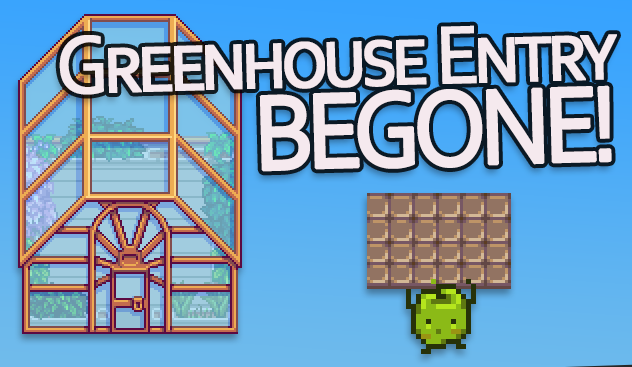
<style>
.page{position:relative;width:632px;height:367px}
.page>*{position:absolute;margin:0}
.t1{font:86px/82px "Corbel";letter-spacing:-0.075em;color:#f5e9ee;font-variant:small-caps;font-weight:bold;scale:0.9 1}
.t2{font:112px/82px "Corbel";letter-spacing:-0.075em;color:#f5e9ee;font-variant:small-caps;font-weight:bold;scale:0.9 1}
</style>
<div class="page">
<p class="t1" style="left:59px;top:25px;width:558px;height:147px;text-align:right;rotate:-2deg">Greenhouse Entry<br><span class="t2">BEGONE!</span></p>
</div>
